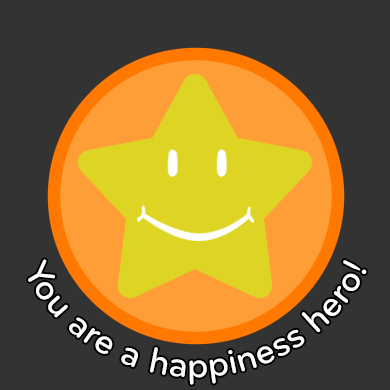
<style>
.page{position:relative;width:390px;height:390px;background:#333333}
.page>*{position:absolute;margin:0}
.t1{font:37.5px "Bryant-Medium";color:#ffffff}
</style>
<div class="page">
<p class="t1" style="left:28px;top:259px;width:339px;height:126px">You are a happiness hero!</p>
</div>
